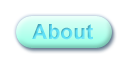
<style>
.page{position:relative;width:128px;height:64px;background:#ffffff}
.page>*{position:absolute;margin:0}
.t1{font:21px "Arial-BoldMT"}
</style>
<div class="page">
<p class="t1" style="left:32px;top:24px;width:61px;height:16px">About</p>
</div>
